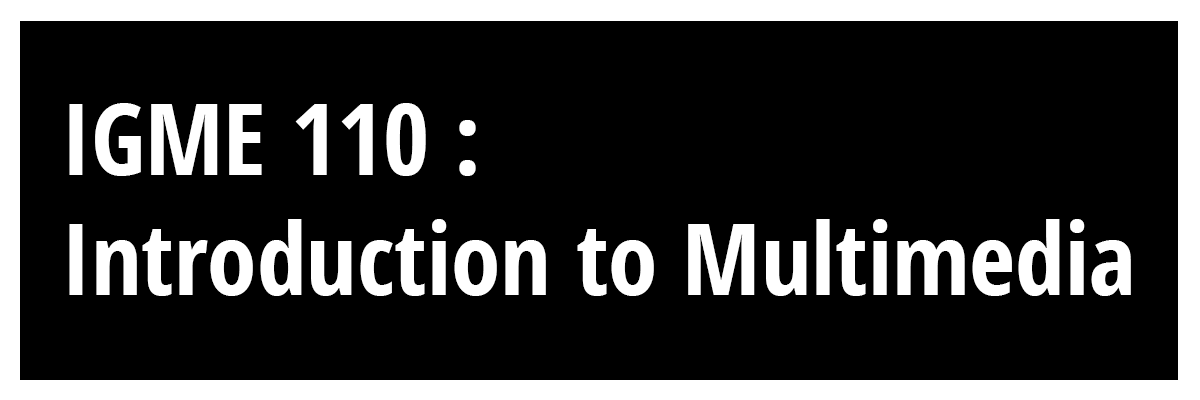
<style>
.page{position:relative;width:1200px;height:400px;background:#000000}
.page>*{position:absolute;margin:0}
.t1{font:100px "OpenSans-CondensedBold";color:#ffffff}
</style>
<div class="page">
<p class="t1" style="left:69px;top:103px;width:1062px;height:193px">IGME 110 : <br>Introduction to Multimedia</p>
</div>
